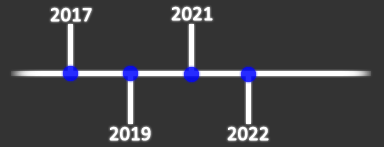
<style>
.page{position:relative;width:384px;height:147px;background:#333333}
.page>*{position:absolute;margin:0}
.t1{font:20px "Calibri";color:#ffffff;font-weight:bold}
</style>
<div class="page">
<p class="t1" style="left:171px;top:6px;width:42px;height:15px">2021</p>
<p class="t1" style="left:50px;top:7px;width:42px;height:15px">2017</p>
<p class="t1" style="left:109px;top:126px;width:42px;height:15px">2019</p>
</div>
